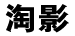
<style>
.page{position:relative;width:75px;height:36px;background:#ffffff}
.page>*{position:absolute;margin:0}
.t1{font:31.5px "FZYDCHJW--GB1-0";letter-spacing:0.24em;color:#000000}
</style>
<div class="page">
<p class="t1" style="left:5px;top:4px;width:64px;height:29px">淘影</p>
</div>
